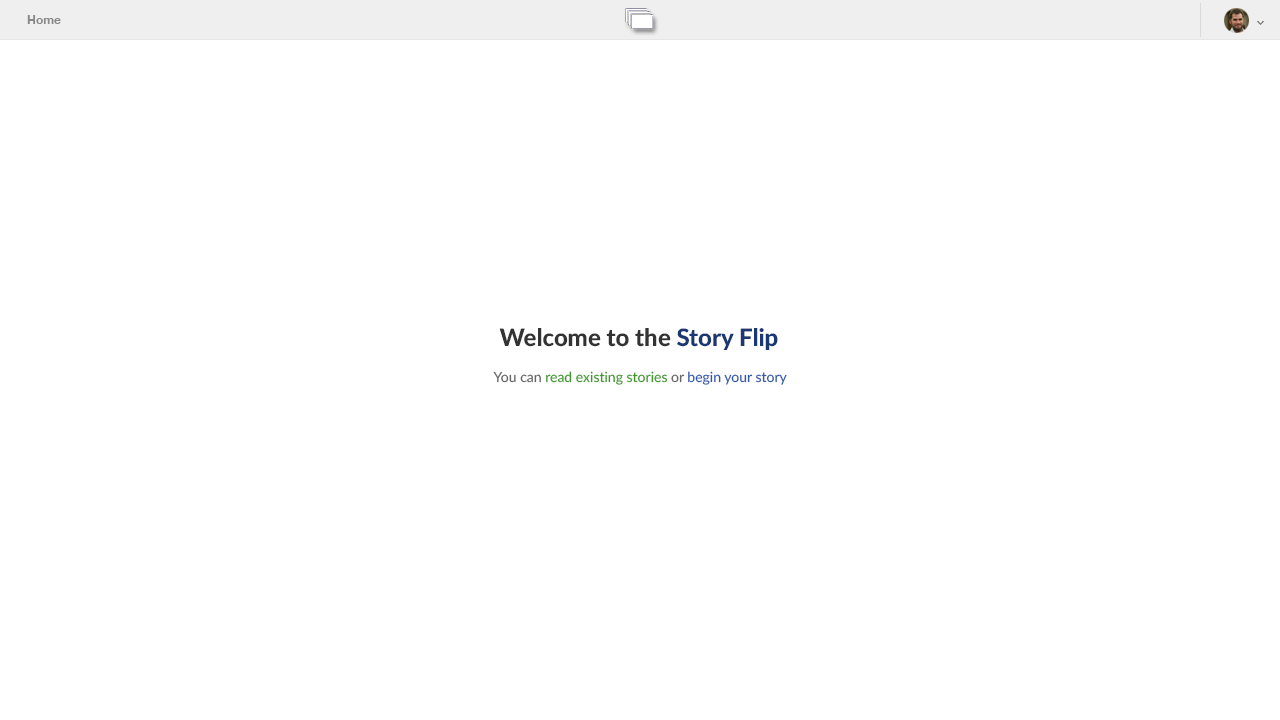
<style>
.page{position:relative;width:1280px;height:720px;background:#ffffff}
.page>*{position:absolute;margin:0}
.t1{font:12px "HelveticaNeue-Bold";color:#888888}
.t2{font:24px "Lato-Heavy";color:#333333}
.t3{font:24px "Lato-Heavy";color:#1b3872}
.t4{font:14px "Lato-Regular";color:#3e9829}
.t5{font:14px "Lato-Regular";color:#666666}
.t6{font:14px "Lato-Regular";color:#3359a8}
</style>
<div class="page">
<p class="t1" style="left:27px;top:15px;width:34px;height:9px">Home</p>
<p class="t2" style="left:499px;top:328px;width:279px;height:22px">Welcome to the <span class="t3">Story Flip</span></p>
<p class="t4" style="left:493px;top:371px;width:294px;height:14px"><span class="t5">You can </span>read existing stories<span class="t5"> or </span><span class="t6">begin your story</span></p>
</div>
